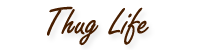
<style>
.page{position:relative;width:200px;height:50px;background:#ffffff}
.page>*{position:absolute;margin:0}
.t1{font:41.7px "FreestyleScript-Regular";color:#481e00}
</style>
<div class="page">
<p class="t1" style="left:47px;top:6px;width:102px;height:40px">Thug Life</p>
</div>
